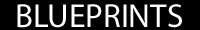
<style>
.page{position:relative;width:200px;height:30px;background:#000000}
.page>*{position:absolute;margin:0}
.t1{font:33.2px "MyriadPro-Regular";color:#ffffff}
</style>
<div class="page">
<p class="t1" style="left:17px;top:4px;width:165px;height:24px">BLUEPRINTS</p>
</div>
